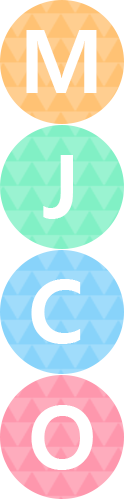
<style>
.page{position:relative;width:124px;height:499px;background:#ffffff}
.page>*{position:absolute;margin:0}
.t1{font:87.8px "MalgunGothicBold";letter-spacing:0.01em;color:#ffffff}
</style>
<div class="page">
<p class="t1" style="left:26px;top:30px;width:71px;height:63px">M</p>
<p class="t1" style="left:43px;top:155px;width:30px;height:64px">J</p>
<p class="t1" style="left:31px;top:279px;width:50px;height:65px">C</p>
<p class="t1" style="left:31px;top:405px;width:62px;height:65px">O</p>
</div>
